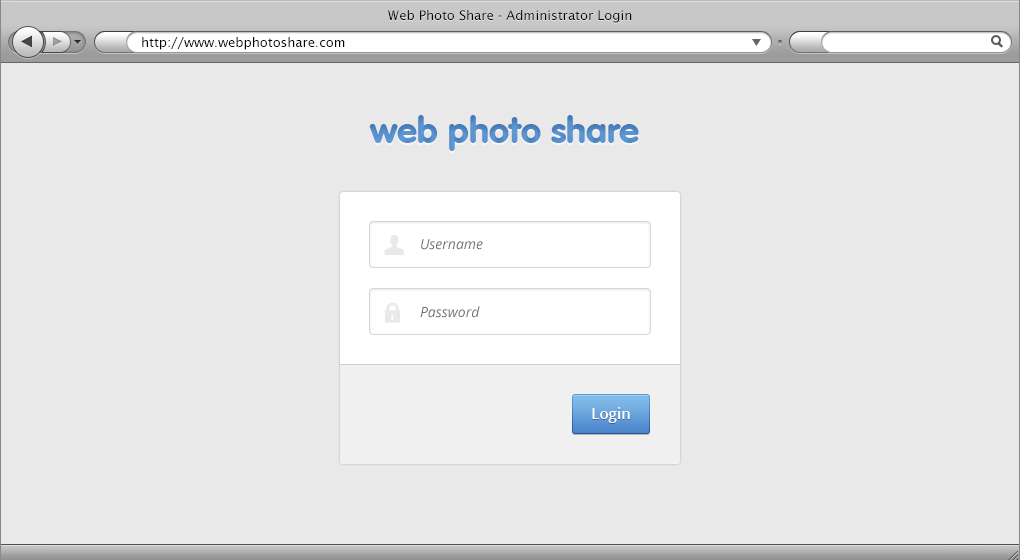
<style>
.page{position:relative;width:1020px;height:560px;background:#e9e9e9}
.page>*{position:absolute;margin:0}
.t1{font:13px "LucidaSans";color:#000000}
.t2{font:36px "VAGRounded-Black";color:#619bd7}
.t3{font:14px "OpenSans-Italic";color:#6a7073}
.t4{font:15px "OpenSans-Semibold";color:#ffffff}
</style>
<div class="page">
<p class="t1" style="left:388px;top:10px;width:244px;height:13px">Web Photo Share - Administrator Login</p>
<p class="t1" style="left:142px;top:37px;width:203px;height:13px">http://www.webphotoshare.com</p>
<p class="t2" style="left:369px;top:115px;width:270px;height:36px">web photo share</p>
<p class="t3" style="left:421px;top:239px;width:62px;height:11px">Username</p>
<p class="t3" style="left:420px;top:306px;width:60px;height:12px">Password</p>
<p class="t4" style="left:592px;top:407px;width:38px;height:16px">Login</p>
</div>
